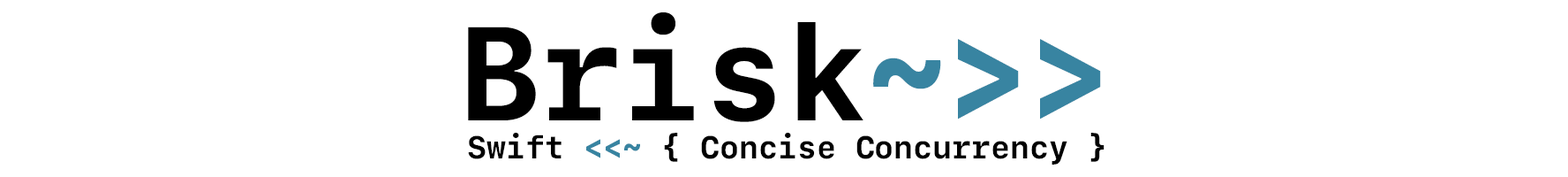
<style>
.page{position:relative;width:1568px;height:177px;background:#ffffff}
.page>*{position:absolute;margin:0}
.t1{font:226px "SFMono-Bold";color:#000000}
.t2{font:226px "SFMono-Bold";color:#3884a1}
.t3{font:53.9px "SFMono-Bold";color:#000000}
.t4{font:53.9px "SFMono-Bold";color:#3884a1}
</style>
<div class="page">
<p class="t1" style="left:468px;top:12px;width:633px;height:110px">Brisk<span class="t2">~&gt;&gt;</span></p>
<p class="t3" style="left:468px;top:132px;width:636px;height:32px">Swift <span class="t4">&lt;&lt;~</span> { Concise Concurrency }</p>
</div>
